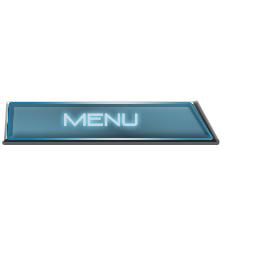
<style>
.page{position:relative;width:256px;height:256px;background:#ffffff}
.page>*{position:absolute;margin:0}
.t1{font:16.7px "VenusRising-Regular";color:#c8d8df;text-transform:uppercase}
</style>
<div class="page">
<p class="t1" style="left:64px;top:113px;width:74px;height:14px">Menu</p>
</div>
